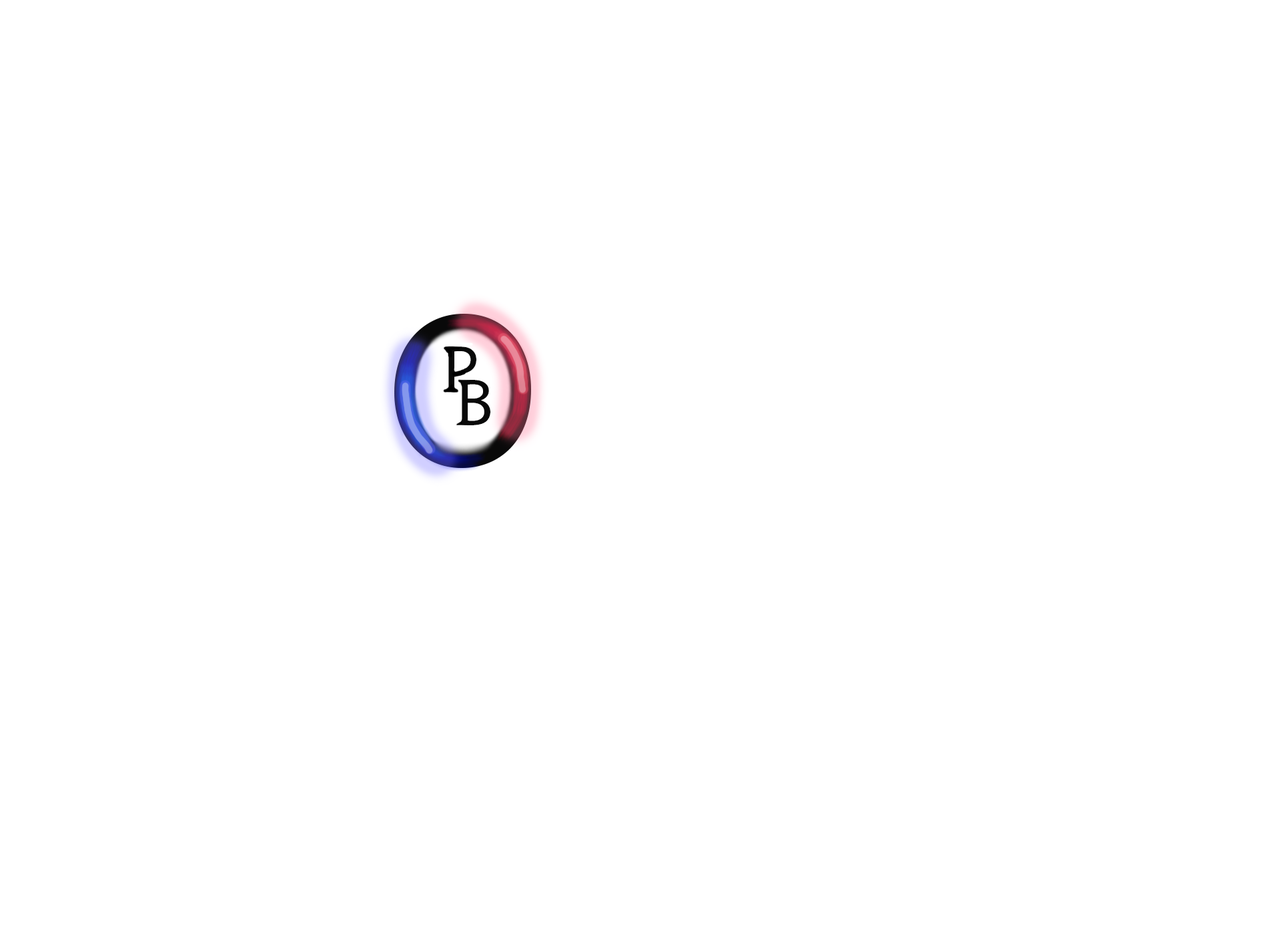
<style>
.page{position:relative;width:1261px;height:946px;background:#ffffff}
.page>*{position:absolute;margin:0}
.t1{font:66.7px "MyriadPro-Regular";color:#090909}
</style>
<div class="page">
<p class="t1" style="left:448px;top:346px;width:28px;height:45px">P</p>
<p class="t1" style="left:462px;top:380px;width:28px;height:45px">B</p>
</div>
